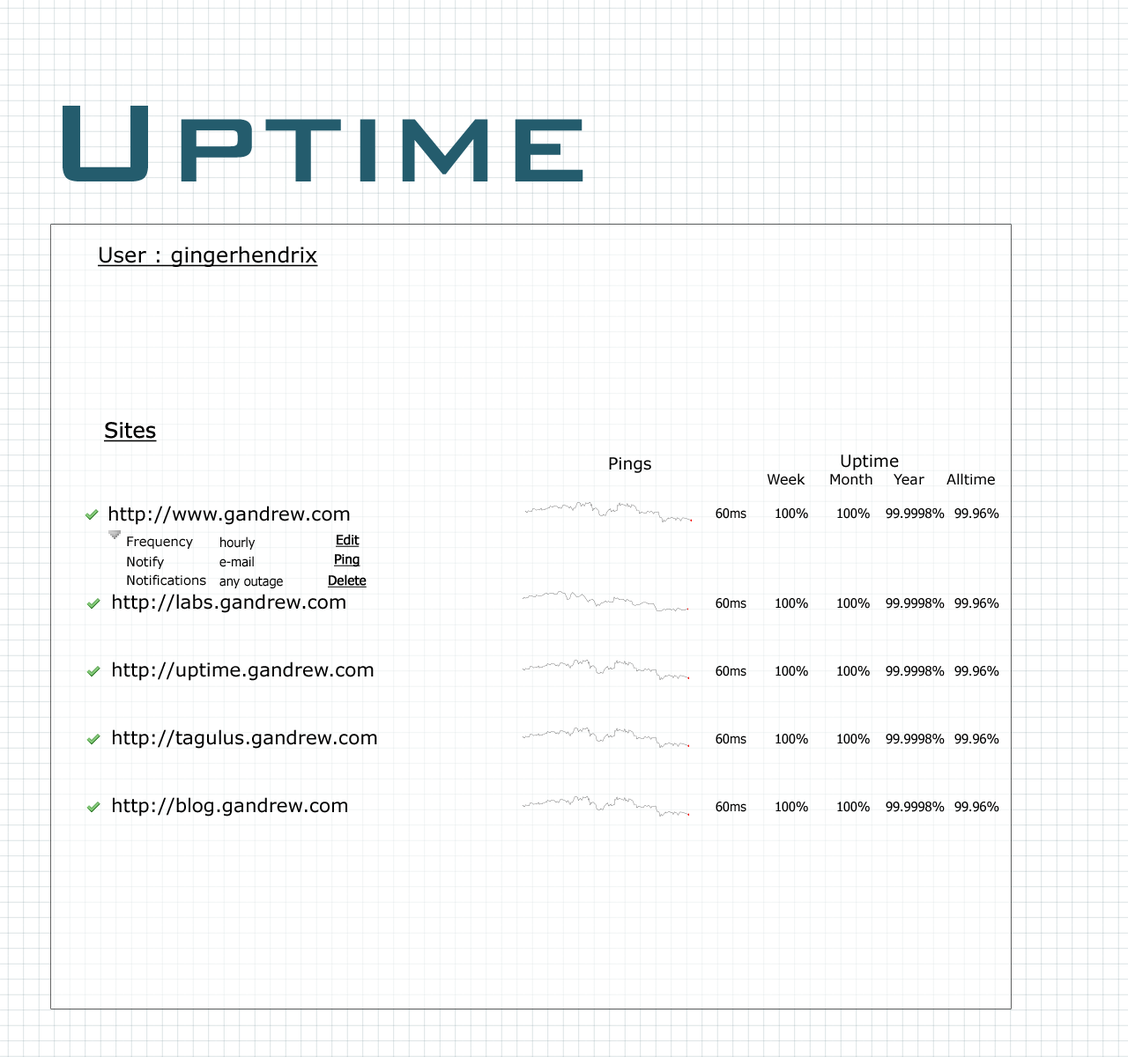
<style>
.page{position:relative;width:1128px;height:1057px;background:#ffffff}
.page>*{position:absolute;margin:0}
.t1{font:146.8px "BankGothicBT-Medium";color:#245c6d}
.t2{font:21.1px "Verdana";color:#000000;text-decoration:underline}
.t3{font:16.4px "Verdana";color:#000000}
.t4{font:14.1px "Verdana";color:#000000}
.t5{font:18.8px "Verdana";color:#000000}
.t6{font:12.9px "Tahoma";color:#000000}
.t7{font:12.9px "Tahoma";color:#000000;font-weight:bold;text-decoration:underline}
.t8{font:12.9px "Verdana";color:#000000}
</style>
<div class="page">
<p class="t1" style="left:63px;top:106px;width:520px;height:76px">Uptime</p>
<p class="t2" style="left:98px;top:246px;width:220px;height:21px">User : gingerhendrix</p>
<p class="t2" style="left:104px;top:422px;width:53px;height:20px">Sites</p>
<p class="t3" style="left:609px;top:457px;width:42px;height:16px">Pings</p>
<p class="t3" style="left:841px;top:455px;width:58px;height:16px">Uptime</p>
<p class="t4" style="left:767px;top:473px;width:38px;height:12px">Week</p>
<p class="t4" style="left:830px;top:473px;width:42px;height:12px">Month</p>
<p class="t4" style="left:946px;top:473px;width:49px;height:12px">Alltime</p>
<p class="t4" style="left:893px;top:474px;width:31px;height:11px">Year</p>
<p class="t5" style="left:109px;top:506px;width:241px;height:19px">http://www.gandrew.com</p>
<p class="t6" style="left:715px;top:508px;width:31px;height:11px">60ms</p>
<p class="t6" style="left:775px;top:508px;width:33px;height:11px">100%</p>
<p class="t6" style="left:837px;top:508px;width:33px;height:11px">100%</p>
<p class="t6" style="left:885px;top:508px;width:60px;height:11px">99.9998%</p>
<p class="t6" style="left:954px;top:508px;width:45px;height:11px">99.96%</p>
<p class="t7" style="left:336px;top:534px;width:23px;height:13px">Edit</p>
<p class="t8" style="left:127px;top:537px;width:66px;height:12px">Frequency</p>
<p class="t6" style="left:220px;top:537px;width:36px;height:13px">hourly</p>
<p class="t8" style="left:127px;top:556px;width:37px;height:13px">Notify</p>
<p class="t6" style="left:219px;top:556px;width:35px;height:11px">e-mail</p>
<p class="t7" style="left:334px;top:554px;width:26px;height:13px">Ping</p>
<p class="t8" style="left:127px;top:574px;width:79px;height:12px">Notifications</p>
<p class="t6" style="left:219px;top:576px;width:64px;height:13px">any outage</p>
<p class="t7" style="left:328px;top:574px;width:39px;height:14px">Delete</p>
<p class="t5" style="left:113px;top:594px;width:232px;height:19px">http://labs.gandrew.com</p>
<p class="t6" style="left:715px;top:598px;width:31px;height:11px">60ms</p>
<p class="t6" style="left:775px;top:598px;width:33px;height:11px">100%</p>
<p class="t6" style="left:837px;top:598px;width:33px;height:11px">100%</p>
<p class="t6" style="left:885px;top:598px;width:60px;height:11px">99.9998%</p>
<p class="t6" style="left:954px;top:598px;width:45px;height:11px">99.96%</p>
<p class="t5" style="left:113px;top:662px;width:261px;height:19px">http://uptime.gandrew.com</p>
<p class="t6" style="left:715px;top:666px;width:31px;height:11px">60ms</p>
<p class="t6" style="left:775px;top:666px;width:33px;height:11px">100%</p>
<p class="t6" style="left:837px;top:666px;width:33px;height:11px">100%</p>
<p class="t6" style="left:885px;top:666px;width:60px;height:11px">99.9998%</p>
<p class="t6" style="left:954px;top:666px;width:45px;height:11px">99.96%</p>
<p class="t5" style="left:113px;top:730px;width:264px;height:19px">http://tagulus.gandrew.com</p>
<p class="t6" style="left:715px;top:734px;width:31px;height:11px">60ms</p>
<p class="t6" style="left:775px;top:734px;width:33px;height:11px">100%</p>
<p class="t6" style="left:837px;top:734px;width:33px;height:11px">100%</p>
<p class="t6" style="left:885px;top:734px;width:60px;height:11px">99.9998%</p>
<p class="t6" style="left:954px;top:734px;width:45px;height:11px">99.96%</p>
<p class="t5" style="left:113px;top:797px;width:234px;height:20px">http://blog.gandrew.com</p>
<p class="t6" style="left:715px;top:802px;width:31px;height:10px">60ms</p>
<p class="t6" style="left:775px;top:802px;width:33px;height:10px">100%</p>
<p class="t6" style="left:837px;top:802px;width:33px;height:10px">100%</p>
<p class="t6" style="left:885px;top:802px;width:60px;height:10px">99.9998%</p>
<p class="t6" style="left:954px;top:802px;width:45px;height:10px">99.96%</p>
</div>
